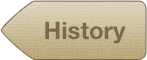
<style>
.page{position:relative;width:147px;height:60px}
.page>*{position:absolute;margin:0}
.t1{font:24px "HelveticaNeue-Bold";color:#7c684c}
</style>
<div class="page">
<p class="t1" style="left:45px;top:21px;width:81px;height:23px">History</p>
</div>
